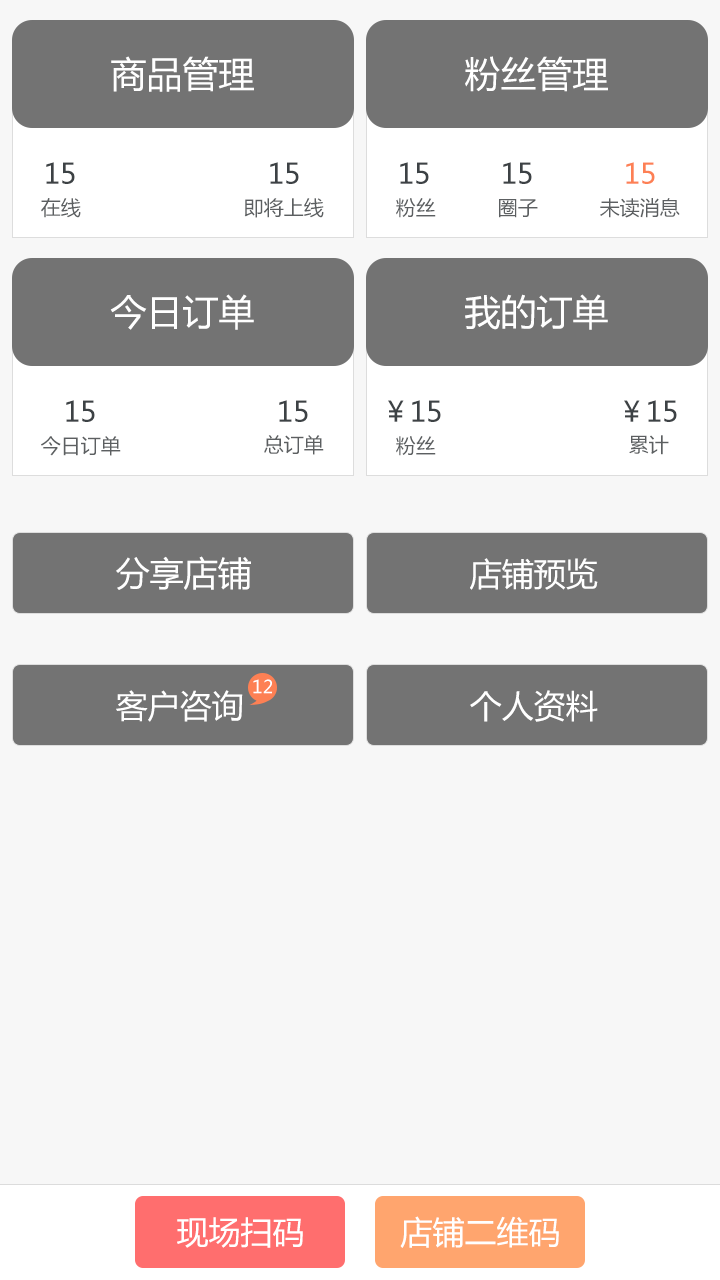
<style>
.page{position:relative;width:720px;height:1280px;background:#f7f7f7}
.page>*{position:absolute;margin:0}
.t1{font:36px "MicrosoftYaHei";color:#ffffff}
.t2{font:28px "MicrosoftYaHei";color:#3d4245}
.t3{font:28px "MicrosoftYaHei";color:#fd8054}
.t4{font:20px "MicrosoftYaHei";color:#5c5f61}
.t5{font:34px "MicrosoftYaHei";color:#ffffff}
.t6{font:32px "MicrosoftYaHei";color:#ffffff}
.t7{font:18px "MicrosoftYaHei";color:#ffffff}
</style>
<div class="page">
<p class="t1" style="left:111px;top:56px;width:143px;height:36px">商品管理</p>
<p class="t1" style="left:465px;top:56px;width:143px;height:36px">粉丝管理</p>
<p class="t2" style="left:46px;top:162px;width:29px;height:22px">15</p>
<p class="t2" style="left:270px;top:162px;width:29px;height:22px">15</p>
<p class="t2" style="left:400px;top:162px;width:29px;height:22px">15</p>
<p class="t2" style="left:503px;top:162px;width:29px;height:22px">15</p>
<p class="t3" style="left:626px;top:162px;width:29px;height:22px">15</p>
<p class="t4" style="left:41px;top:198px;width:40px;height:20px">在线</p>
<p class="t4" style="left:244px;top:198px;width:80px;height:20px">即将上线</p>
<p class="t4" style="left:396px;top:198px;width:40px;height:20px">粉丝</p>
<p class="t4" style="left:600px;top:198px;width:80px;height:20px">未读消息</p>
<p class="t4" style="left:499px;top:199px;width:39px;height:19px">圈子</p>
<p class="t1" style="left:110px;top:294px;width:144px;height:36px">今日订单</p>
<p class="t1" style="left:465px;top:294px;width:143px;height:36px">我的订单</p>
<p class="t2" style="left:66px;top:400px;width:29px;height:22px">15</p>
<p class="t2" style="left:66px;top:400px;width:29px;height:22px">15</p>
<p class="t2" style="left:279px;top:400px;width:29px;height:22px">15</p>
<p class="t2" style="left:388px;top:400px;width:53px;height:22px">￥15</p>
<p class="t2" style="left:624px;top:400px;width:53px;height:22px">￥15</p>
<p class="t4" style="left:41px;top:436px;width:80px;height:20px">今日订单</p>
<p class="t4" style="left:264px;top:435px;width:60px;height:20px">总订单</p>
<p class="t4" style="left:396px;top:436px;width:40px;height:20px">粉丝</p>
<p class="t4" style="left:629px;top:435px;width:40px;height:20px">累计</p>
<p class="t5" style="left:116px;top:556px;width:135px;height:34px">分享店铺</p>
<p class="t6" style="left:470px;top:558px;width:128px;height:32px">店铺预览</p>
<p class="t7" style="left:253px;top:679px;width:19px;height:15px">12</p>
<p class="t6" style="left:116px;top:690px;width:127px;height:32px">客户咨询</p>
<p class="t6" style="left:470px;top:690px;width:128px;height:32px">个人资料</p>
<p class="t6" style="left:177px;top:1217px;width:126px;height:31px">现场扫码</p>
<p class="t6" style="left:400px;top:1216px;width:159px;height:32px">店铺二维码</p>
</div>
